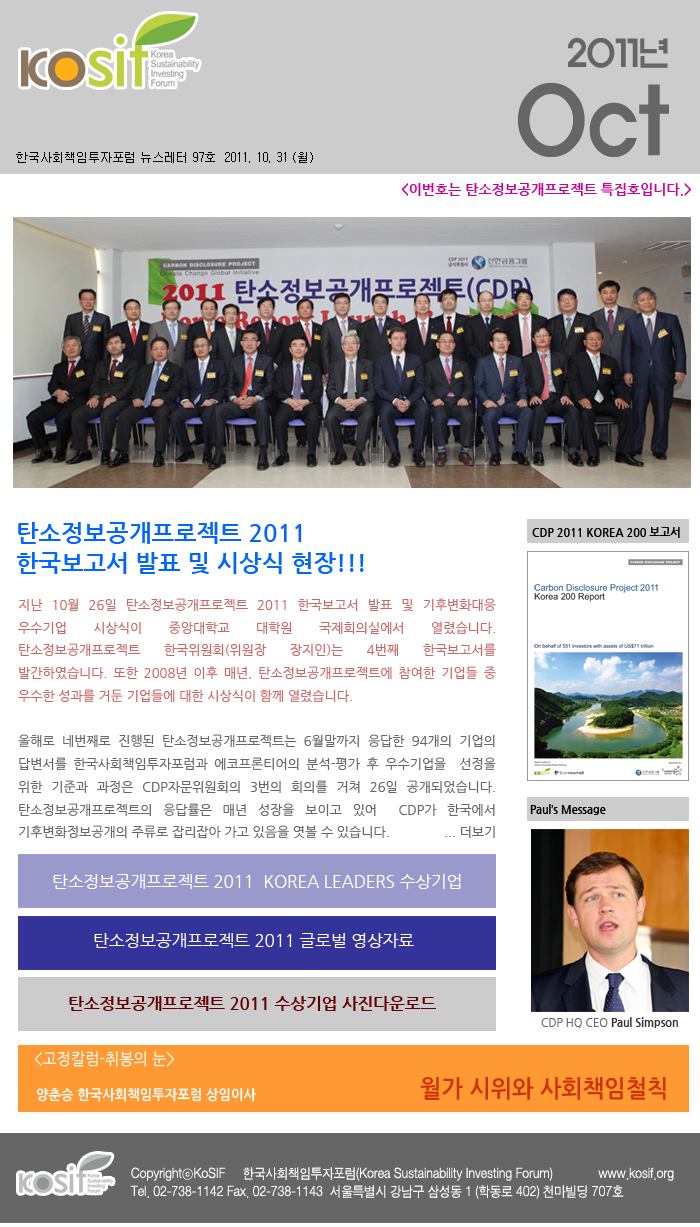
<style>
.page{position:relative;width:700px;height:1227px;background:#ffffff}
.page>*{position:absolute;margin:0}
.t1{font:36.1px/41.9px "ExpoM-HM";color:#666666;scale:0.89 1}
.t2{font:90.2px/41.9px "ExpoM-HM";color:#666666;scale:0.89 1}
.t3{font:12px "Gulim";color:#000000}
.t4{font:14px "NanumGothicBold";color:#cc0099}
.t5{font:24px/30px "NanumGothicBold";color:#0066ff}
.t6{font:11px "NanumGothicBold";color:#000000}
.t7{font:13px "NanumGothic";color:#666666}
.t8{font:13px "NanumGothic";color:#cc6666}
.t9{font:16.7px "NanumGothic";color:#ffffff}
.t10{font:16.7px "NanumGothicBold";color:#660000}
.t11{font:11px "NanumGothicBold";color:#333333}
.t12{font:11px "NanumGothic";color:#666666}
.t13{font:16px "NanumGothic";color:#ffffff;scale:0.95 1}
.t14{font:24px "NanumGothicBold";color:#cc3300;scale:0.95 1}
.t15{font:14px "NanumGothicBold";color:#ffffff;scale:0.95 1}
</style>
<div class="page">
<p class="t1" style="left:518px;top:37px;width:151px;height:120px;text-align:right">2011년<br><span class="t2">Oct</span></p>
<p class="t3" style="left:16px;top:152px;width:297px;height:11px">한국사회책임투자포럼 뉴스레터 97호  2011. 10. 31 (월)</p>
<p class="t4" style="left:401px;top:182px;width:290px;height:15px">&lt;이번호는 탄소정보공개프로젝트 특집호입니다.&gt;</p>
<p class="t5" style="left:17px;top:522px;width:347px;height:52px">탄소정보공개프로젝트 2011  <br>한국보고서 발표 및 시상식 현장!!!</p>
<p class="t6" style="left:532px;top:527px;width:148px;height:11px">CDP 2011 KOREA 200 보고서</p>
<p class="t7" style="left:18px;top:598px;width:478px;height:240px;text-align:justify"><span class="t8">지난 10월 26일 탄소정보공개프로젝트 2011 한국보고서 발표 및 기후변화대응 우수기업 시상식이 중앙대학교 대학원 국제회의실에서 열렸습니다. 탄소정보공개프로젝트 한국위원회(위원장 장지인)는 4번째 한국보고서를 발간하였습니다. 또한 2008년 이후 매년, 탄소정보공개프로젝트에 참여한 기업들 중 우수한 성과를 거둔 기업들에 대한 시상식이 함께 열렸습니다.<br><br></span>올해로 네번째로 진행된 탄소정보공개프로젝트는 6월말까지 응답한 94개의 기업의 답변서를 한국사회책임투자포럼과 에코프론티어의 분석-평가 후 우수기업을  선정을 위한 기준과 과정은 CDP자문위원회의 3번의 회의를 거쳐 26일 공개되었습니다.  탄소정보공개프로젝트의 응답률은 매년 성장을 보이고 있어  CDP가 한국에서 기후변화정보공개의 주류로 잡리잡아 가고 있음을 엿볼 수 있습니다.               ... 더보기</p>
<p class="t6" style="left:530px;top:804px;width:76px;height:11px">Paul’s Message</p>
<p class="t9" style="left:53px;top:874px;width:408px;height:15px">탄소정보공개프로젝트 2011  KOREA LEADERS 수상기업</p>
<p class="t9" style="left:94px;top:933px;width:320px;height:15px">탄소정보공개프로젝트 2011 글로벌 영상자료</p>
<p class="t10" style="left:69px;top:996px;width:367px;height:15px">탄소정보공개프로젝트 2011 수상기업 사진다운로드</p>
<p class="t11" style="left:541px;top:1017px;width:137px;height:11px"><span class="t12">CDP HQ CEO </span>Paul Simpson</p>
<p class="t13" style="left:35px;top:1051px;width:139px;height:16px">&lt;고정칼럼-취봉의 눈&gt;</p>
<p class="t14" style="left:420px;top:1077px;width:246px;height:23px">월가 시위와 사회책임철칙</p>
<p class="t15" style="left:36px;top:1087px;width:220px;height:15px">양춘승 한국사회책임투자포럼 상임이사</p>
</div>
